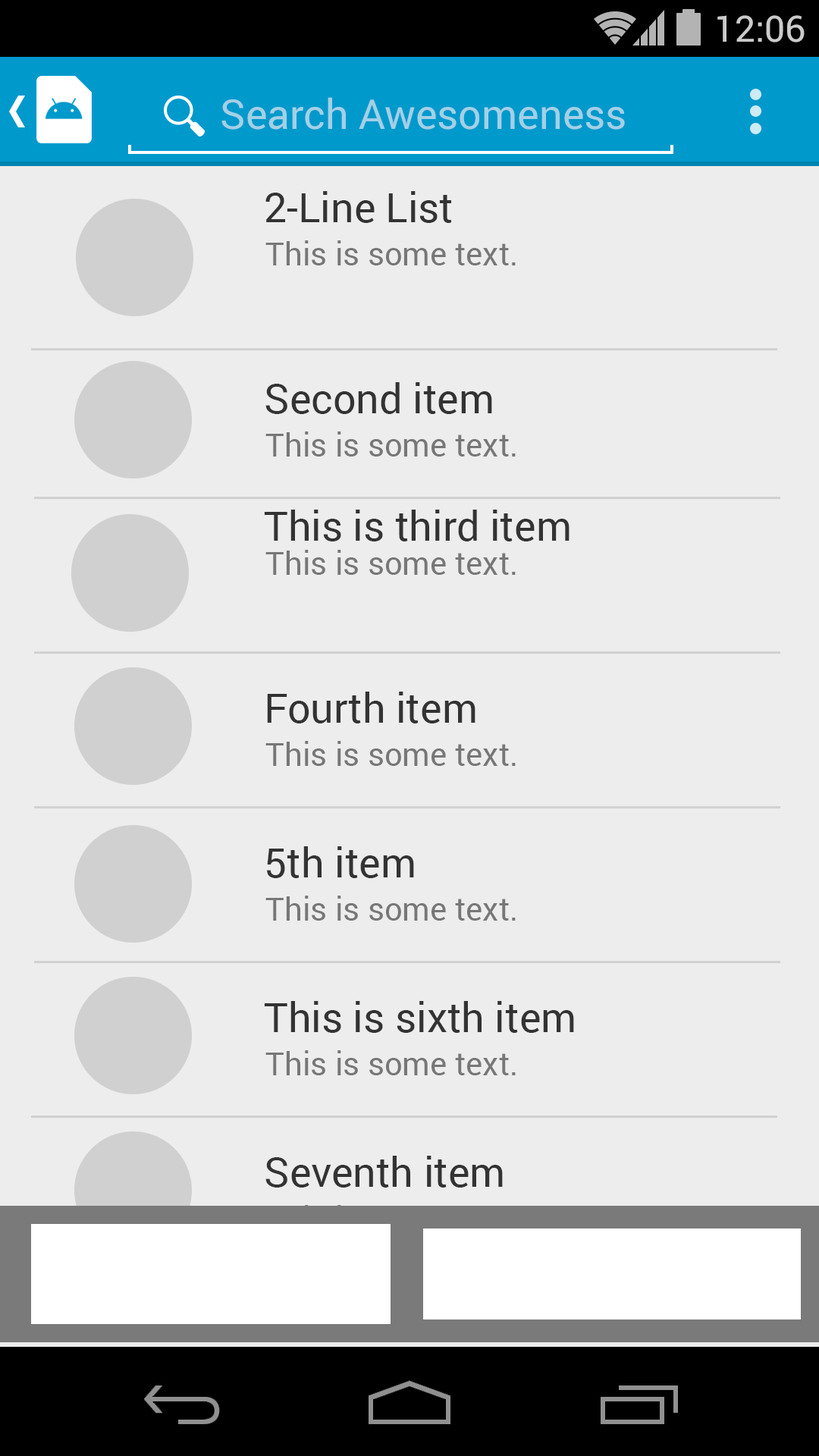
<style>
.page{position:relative;width:819px;height:1456px;background:#ededed}
.page>*{position:absolute;margin:0}
.t1{font:36.4px "Roboto-Regular";color:#cbcbcb}
.t2{font:40.9px "Roboto-Regular";color:#a3d0e6}
.t3{font:40.9px "Roboto-Regular";color:#333333}
.t4{font:31.8px "Roboto-Regular";color:#777777}
</style>
<div class="page">
<p class="t1" style="left:717px;top:15px;width:88px;height:27px">12:06</p>
<p class="t2" style="left:221px;top:97px;width:404px;height:33px">Search Awesomeness</p>
<p class="t3" style="left:265px;top:191px;width:187px;height:32px">2-Line List</p>
<p class="t4" style="left:265px;top:240px;width:251px;height:25px">This is some text.</p>
<p class="t3" style="left:265px;top:382px;width:227px;height:32px">Second item</p>
<p class="t4" style="left:265px;top:431px;width:251px;height:26px">This is some text.</p>
<p class="t3" style="left:264px;top:510px;width:306px;height:31px">This is third item</p>
<p class="t4" style="left:265px;top:550px;width:251px;height:25px">This is some text.</p>
<p class="t3" style="left:267px;top:692px;width:208px;height:31px">Fourth item</p>
<p class="t4" style="left:265px;top:741px;width:251px;height:25px">This is some text.</p>
<p class="t3" style="left:267px;top:846px;width:147px;height:32px">5th item</p>
<p class="t4" style="left:265px;top:896px;width:251px;height:25px">This is some text.</p>
<p class="t3" style="left:264px;top:1001px;width:310px;height:32px">This is sixth item</p>
<p class="t4" style="left:265px;top:1050px;width:251px;height:25px">This is some text.</p>
<p class="t3" style="left:265px;top:1156px;width:238px;height:32px">Seventh item</p>
</div>
